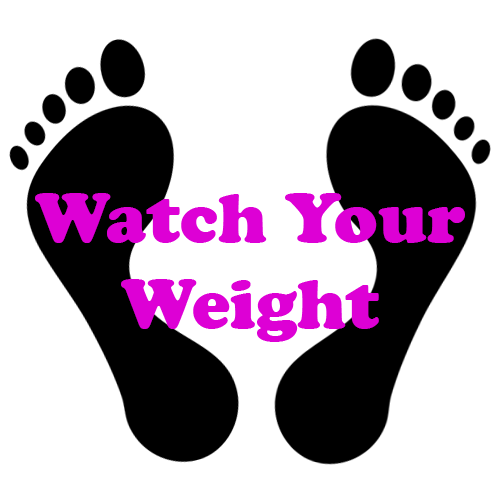
<style>
.page{position:relative;width:500px;height:500px;background:#ffffff}
.page>*{position:absolute;margin:0}
.t1{font:72px "CooperBlack";color:#dd00d5}
</style>
<div class="page">
<p class="t1" style="left:35px;top:193px;width:430px;height:149px;text-align:center">Watch Your<br>Weight</p>
</div>
